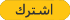
<style>
.page{position:relative;width:70px;height:20px;background:#fec513}
.page>*{position:absolute;margin:0}
.t1{font:14px "Tahoma";color:#333333}
</style>
<div class="page">
<p class="t1" style="left:15px;top:3px;width:38px;height:15px">اشترك</p>
</div>
